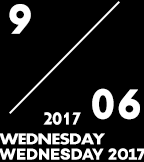
<style>
.page{position:relative;width:144px;height:162px;background:#000000}
.page>*{position:absolute;margin:0}
.t1{font:64px "Aharoni-Bold";color:#ffffff}
.t2{font:26.2px "Aharoni-Bold";letter-spacing:-0.06em;color:#ffffff}
.t3{font:16px "Aharoni-Bold";letter-spacing:-0.06em;color:#ffffff;scale:1.17 1}
</style>
<div class="page">
<p class="t1" style="left:9px;top:4px;width:22px;height:30px">9</p>
<p class="t1" style="left:92px;top:88px;width:48px;height:32px">06</p>
<p class="t2" style="left:43px;top:112px;width:38px;height:13px">2017</p>
<p class="t3" style="left:0px;top:133px;width:105px;height:12px">WEDNESDAY</p>
</div>
